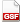
<style>
.page{position:relative;width:22px;height:22px;background:#ffffff}
.page>*{position:absolute;margin:0}
.t1{font:7px "ArialRoundedMTBold";color:#ffffff}
</style>
<div class="page">
<p class="t1" style="left:4px;top:14px;width:15px;height:5px">GSF</p>
</div>
